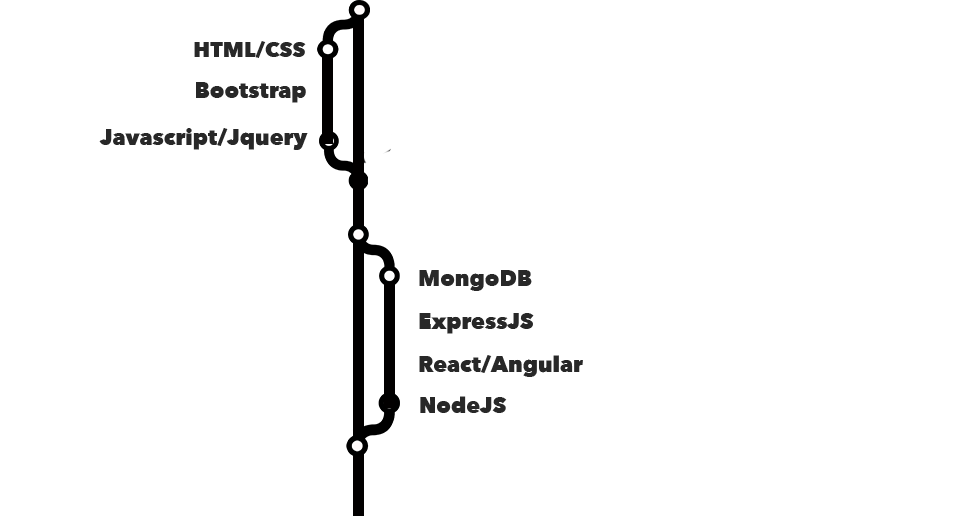
<style>
.page{position:relative;width:955px;height:516px;background:#ffffff}
.page>*{position:absolute;margin:0}
.t1{font:21px "AvenirNext-Heavy";color:#282828}
.t2{font:22px "AvenirNext-Heavy";color:#282828}
</style>
<div class="page">
<p class="t1" style="left:194px;top:41px;width:112px;height:17px">HTML/CSS</p>
<p class="t2" style="left:196px;top:82px;width:110px;height:21px">Bootstrap</p>
<p class="t2" style="left:99px;top:128px;width:209px;height:22px">Javascript/Jquery</p>
<p class="t2" style="left:419px;top:270px;width:113px;height:21px">MongoDB</p>
<p class="t2" style="left:419px;top:313px;width:115px;height:21px">ExpressJS</p>
<p class="t2" style="left:419px;top:355px;width:164px;height:22px">React/Angular</p>
<p class="t2" style="left:420px;top:396px;width:87px;height:17px">NodeJS</p>
</div>
